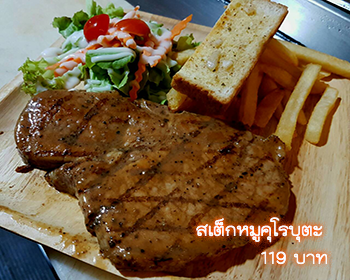
<style>
.page{position:relative;width:350px;height:280px}
.page>*{position:absolute;margin:0}
.t1{font:24px "THKodchasal";color:#ffffff}
</style>
<div class="page">
<p class="t1" style="left:196px;top:217px;width:132px;height:48px;text-align:right">สเต็กหมูคุโรบุตะ<br>บาท 119</p>
</div>
